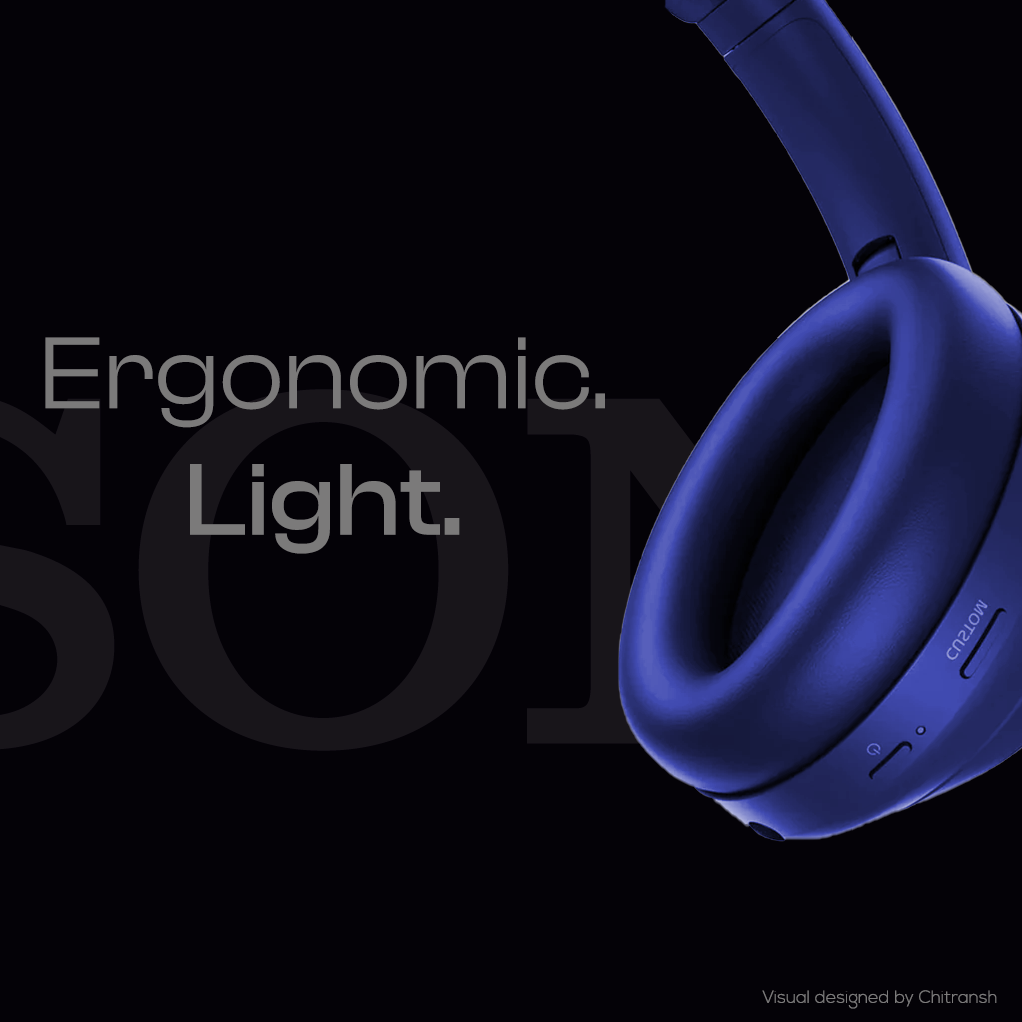
<style>
.page{position:relative;width:1022px;height:1022px;background:#040207}
.page>*{position:absolute;margin:0}
.t1{font:105.3px "ClashDisplayVariable-Regular";color:#7b7a7a}
.t2{font:105.3px "ClashDisplayVariable-Medium";color:#7b7a7a}
.t3{font:17.6px "NexaLight";color:#7b7a7a}
</style>
<div class="page">
<p class="t1" style="left:45px;top:337px;width:560px;height:217px;text-align:center">Ergonomic.<br><span class="t2">Light.</span></p>
<p class="t3" style="left:762px;top:990px;width:235px;height:19px">Visual designed by Chitransh</p>
</div>
